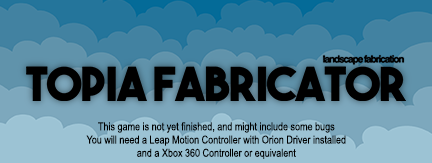
<style>
.page{position:relative;width:432px;height:163px}
.page>*{position:absolute;margin:0}
.t1{font:11px "ArialNarrow";color:#000000}
</style>
<div class="page">
<p class="t1" style="left:86px;top:122px;width:260px;height:37px;text-align:center">This game is not yet finished, and might include some bugs<br>You will need a Leap Motion Controller with Orion Driver installed<br>and a Xbox 360 Controller or equivalent</p>
</div>
